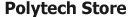
<style>
.page{position:relative;width:133px;height:17px;background:#ffffff}
.page>*{position:absolute;margin:0}
.t1{font:16.7px "Tahoma-Bold";color:#1a1a1a}
</style>
<div class="page">
<p class="t1" style="left:5px;top:1px;width:121px;height:17px">Polytech Store</p>
</div>
